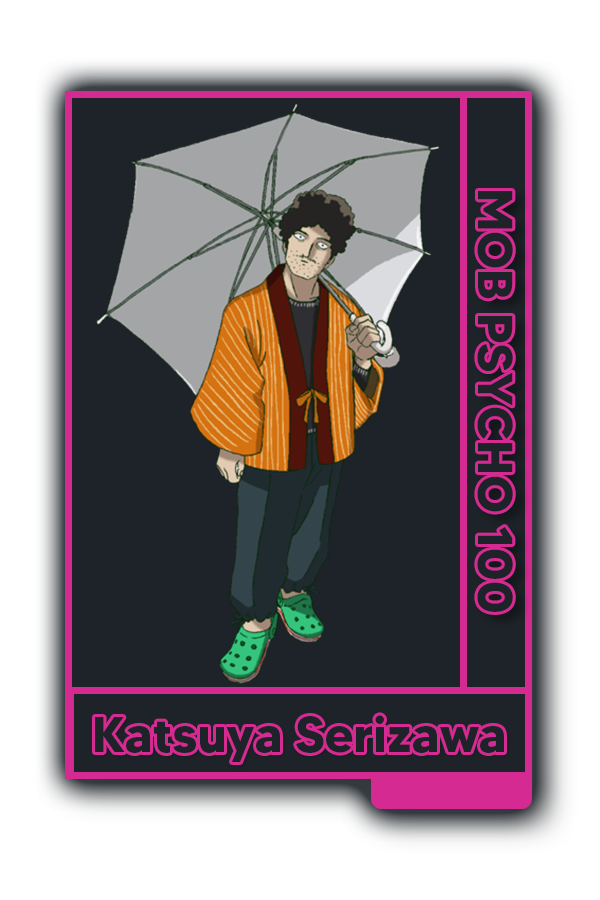
<style>
.page{position:relative;width:600px;height:900px;background:#1d2328}
.page>*{position:absolute;margin:0}
.t1{font:48.8px "MADETOMMY-Bold";color:#1d2328}
.t2{font:49.7px "MADETOMMY-Bold";color:#1d2328}
</style>
<div class="page">
<p class="t1" style="left:477px;top:191px;width:36px;height:421px;rotate:90deg">MOB PSYCHO 100</p>
<p class="t2" style="left:95px;top:715px;width:409px;height:47px">Katsuya Serizawa</p>
</div>
